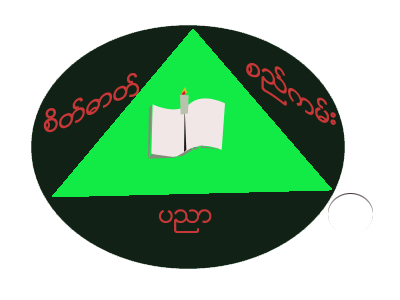
<style>
.page{position:relative;width:400px;height:300px;background:#ffffff}
.page>*{position:absolute;margin:0}
.t1{font:25px "Zawgyi-One";color:#c73737}
</style>
<div class="page">
<p class="t1" style="left:246px;top:63px;width:90px;height:62px">စည္ကမ္း</p>
<p class="t1" style="left:43px;top:73px;width:96px;height:60px">စိတ္ဓာတ္</p>
<p class="t1" style="left:159px;top:209px;width:53px;height:24px">ပညာ</p>
</div>
